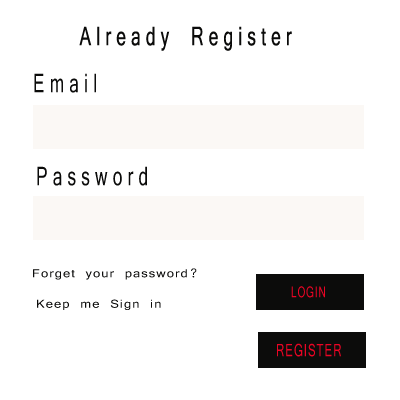
<style>
.page{position:relative;width:400px;height:400px;background:#ffffff}
.page>*{position:absolute;margin:0}
.t1{font:28.8px "Vrinda";letter-spacing:0.27em;color:#0b0b0a;scale:0.67 1}
.t2{font:28.8px "Georgia";letter-spacing:0.27em;color:#0b0b0a;text-transform:uppercase;scale:0.67 1}
.t3{font:12.5px "Vrinda";letter-spacing:0.075em;color:#0b0b0a;scale:1.15 1}
.t4{font:16.8px "Vrinda";letter-spacing:0.075em;color:#ea0424;scale:0.67 1}
.t5{font:12.4px "Vrinda";letter-spacing:0.075em;color:#0b0b0a;scale:1.16 1}
</style>
<div class="page">
<p class="t1" style="left:79px;top:26px;width:213px;height:25px"><span class="t2">      </span>Already Register</p>
<p class="t1" style="left:34px;top:73px;width:62px;height:20px">Email</p>
<p class="t1" style="left:37px;top:166px;width:110px;height:20px">Password</p>
<p class="t3" style="left:33px;top:268px;width:164px;height:12px">Forget your password?</p>
<p class="t4" style="left:291px;top:286px;width:34px;height:12px">LOGIN</p>
<p class="t5" style="left:37px;top:299px;width:124px;height:11px">Keep me Sign in</p>
</div>
